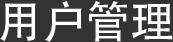
<style>
.page{position:relative;width:173px;height:42px;background:#333333}
.page>*{position:absolute;margin:0}
.t1{font:44.2px "AdobeHeitiStd-Regular";color:#ffffff}
</style>
<div class="page">
<p class="t1" style="left:0px;top:0px;width:173px;height:42px">用户管理</p>
</div>
